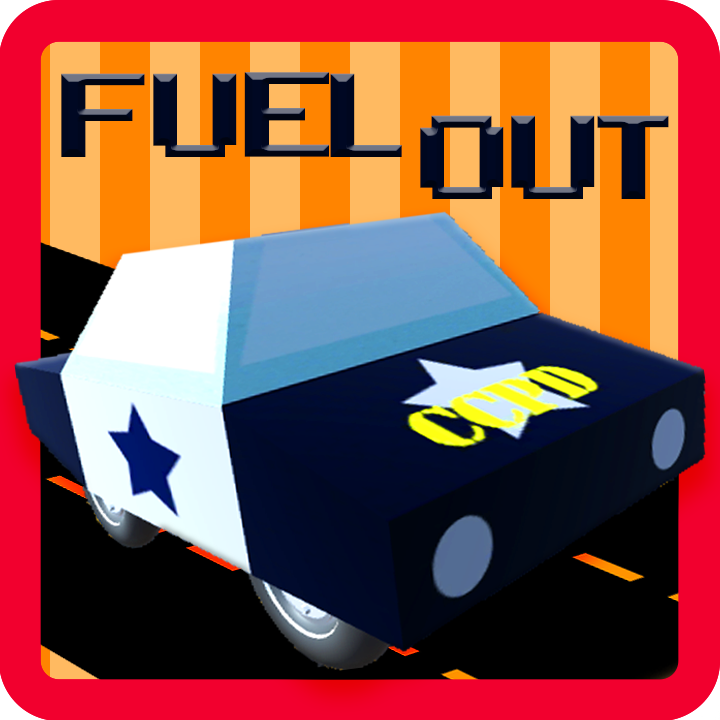
<style>
.page{position:relative;width:720px;height:720px}
.page>*{position:absolute;margin:0}
.t1{font:167.3px "ArcadeClassic";color:#000823}
</style>
<div class="page">
<p class="t1" style="left:61px;top:72px;width:341px;height:85px">Fuel</p>
<p class="t1" style="left:420px;top:115px;width:249px;height:84px">OuT</p>
</div>
